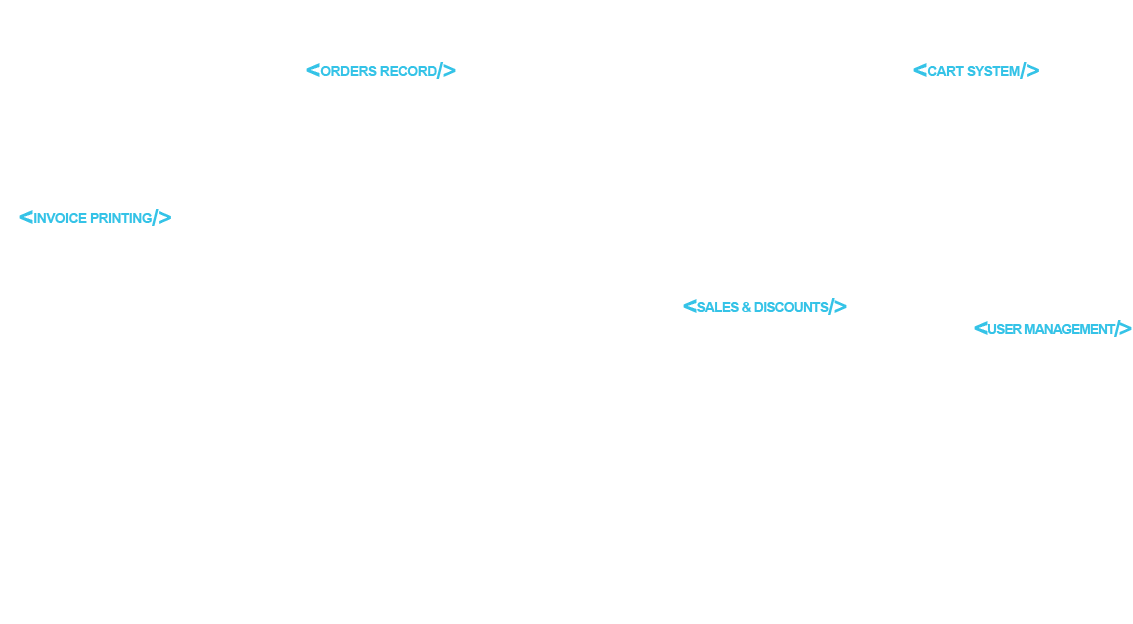
<style>
.page{position:relative;width:1133px;height:624px;background:#ffffff}
.page>*{position:absolute;margin:0}
.t1{font:14px "Arial-BoldMT";letter-spacing:-0.04em;color:#35c3e7;text-transform:uppercase}
.t2{font:26px "Arial-BoldMT";letter-spacing:-0.04em;color:#35c3e7;text-transform:uppercase}
.t3{font:24px "Arial-BoldMT";letter-spacing:-0.04em;color:#35c3e7;text-transform:uppercase}
.t4{font:14px "Arial-BoldMT";letter-spacing:-0.06em;color:#35c3e7;text-transform:uppercase}
.t5{font:26px "Arial-BoldMT";letter-spacing:-0.06em;color:#35c3e7;text-transform:uppercase}
.t6{font:24px "Arial-BoldMT";letter-spacing:-0.06em;color:#35c3e7;text-transform:uppercase}
.t7{font:14px "Arial-BoldMT";letter-spacing:-0.08em;color:#35c3e7;text-transform:uppercase}
.t8{font:26px "Arial-BoldMT";letter-spacing:-0.08em;color:#35c3e7;text-transform:uppercase}
.t9{font:24px "Arial-BoldMT";letter-spacing:-0.08em;color:#35c3e7;text-transform:uppercase}
</style>
<div class="page">
<p class="t1" style="left:306px;top:62px;width:150px;height:17px"><span class="t2">&lt;</span>Orders Record<span class="t3">/&gt;</span></p>
<p class="t1" style="left:913px;top:62px;width:126px;height:17px"><span class="t2">&lt;</span>Cart system<span class="t3">/&gt;</span></p>
<p class="t1" style="left:19px;top:209px;width:152px;height:17px"><span class="t2">&lt;</span>Invoice printing<span class="t3">/&gt;</span></p>
<p class="t4" style="left:683px;top:298px;width:164px;height:17px"><span class="t5">&lt;</span>Sales &amp; Discounts<span class="t6">/&gt;</span></p>
<p class="t7" style="left:974px;top:320px;width:158px;height:17px"><span class="t8">&lt;</span>User Management<span class="t9">/&gt;</span></p>
</div>
